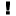
<style>
.page{position:relative;width:16px;height:16px;background:#ffffff}
.page>*{position:absolute;margin:0}
.t1{font:18px "Arial-Black";color:#000000}
</style>
<div class="page">
<p class="t1" style="left:6px;top:1px;width:4px;height:14px">!</p>
</div>
